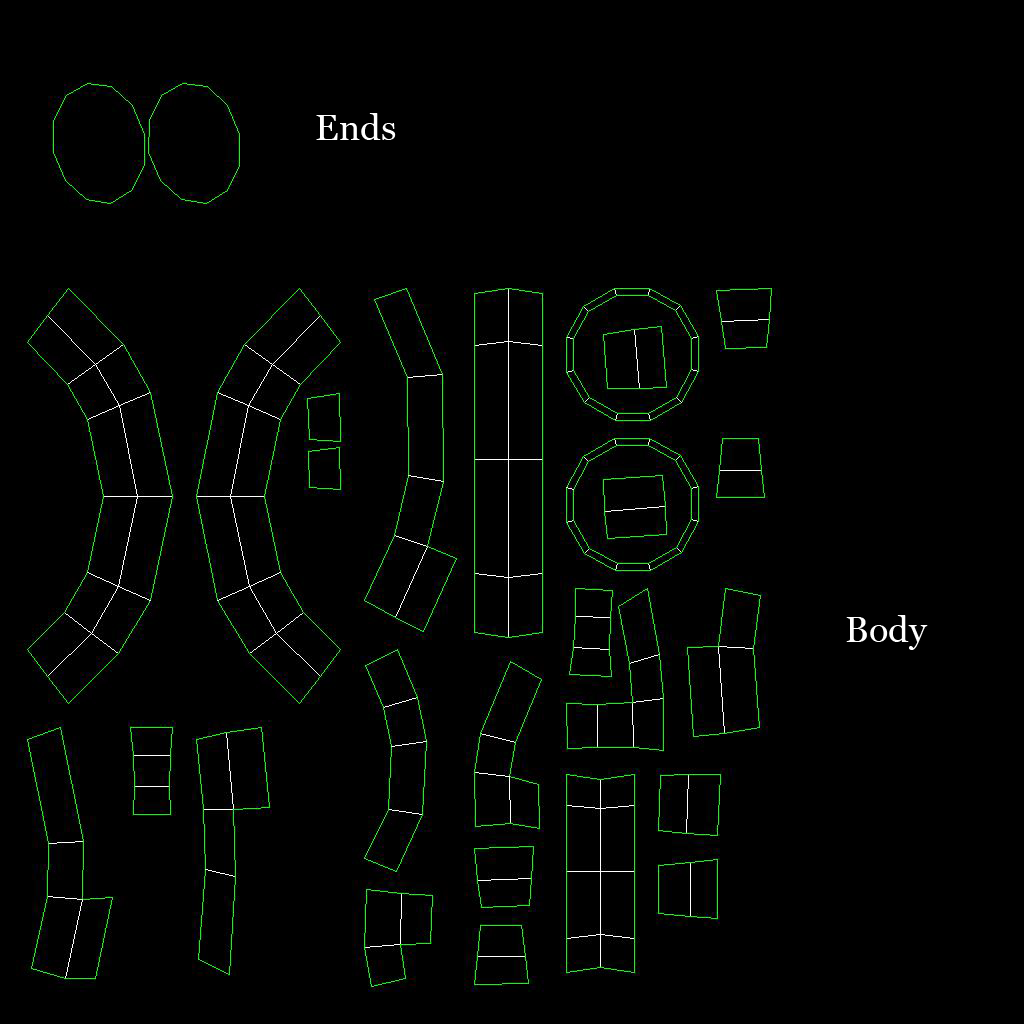
<style>
.page{position:relative;width:1024px;height:1024px;background:#000000}
.page>*{position:absolute;margin:0}
.t1{font:36px "Georgia";color:#ffffff}
</style>
<div class="page">
<p class="t1" style="left:316px;top:113px;width:80px;height:27px">Ends</p>
<p class="t1" style="left:846px;top:615px;width:82px;height:35px">Body</p>
</div>
